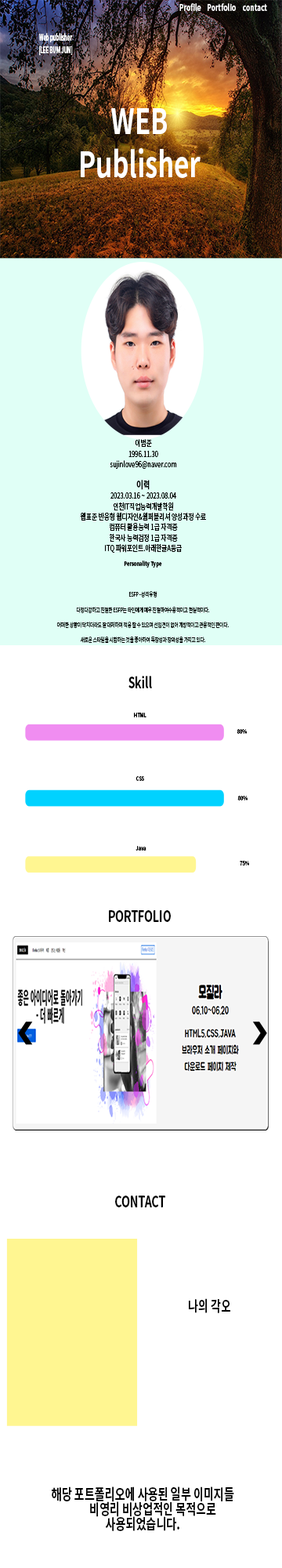
<style>
.page{position:relative;width:282px;height:1568px;background:#ffffff}
.page>*{position:absolute;margin:0}
.t1{font:9.1px "NotoSansKR-Bold";color:#ffffff;scale:0.73 1}
.t2{font:9.1px/12.1px "NotoSansKR-Bold";color:#ffffff;scale:0.51 1}
.t3{font:9.1px/12.1px "NotoSansKR-Regular";color:#ffffff;scale:0.51 1}
.t4{font:35.4px/43px "NotoSansKR-Bold";color:#ffffff;scale:0.73 1}
.t5{font:8.3px/10.5px "NotoSansKR-Regular";color:#000000;scale:0.73 1}
.t6{font:10.1px/10.5px "NotoSansKR-Bold";color:#000000;scale:0.73 1}
.t7{font:6.3px/15.2px "NotoSansKR-Regular";letter-spacing:-0.06em;color:#000000;scale:0.73 1}
.t8{font:8.3px/15.2px "NotoSansKR-Regular";color:#000000;scale:0.73 1}
.t9{font:6.3px/15.2px "NotoSansKR-Bold";color:#000000;scale:0.73 1}
.t10{font:15.2px "NotoSansKR-Bold";color:#000000;scale:0.73 1}
.t11{font:6.1px "NotoSansKR-Bold";color:#000000;scale:0.73 1}
.t12{font:15.2px/15.1px "NotoSansKR-Bold";color:#000000;scale:0.73 1}
</style>
<div class="page">
<p class="t1" style="left:180px;top:3px;width:21px;height:8px">Profile</p>
<p class="t1" style="left:208px;top:3px;width:28px;height:8px">Portfolio</p>
<p class="t1" style="left:243px;top:4px;width:24px;height:7px">contact</p>
<p class="t2" style="left:39px;top:33px;width:34px;height:23px;text-align:center">Web publisher<br>[LEE BUM JUN<span class="t3">]</span></p>
<p class="t4" style="left:81px;top:108px;width:120px;height:70px;text-align:center">WEB<br>Publisher</p>
<p class="t5" style="left:80px;top:439px;width:126px;height:114px;text-align:center">이범준<br>1996.11.30<br>sujinlove96@naver.com<br><br><span class="t6">이력<br></span>2023.03.16 ~ 2023.08.04<br>인천IT직업능력개발학원<br>웹표준 반응형 웹디자인&amp;웹퍼블리셔 양성과정 수료<br>컴퓨터 활용능력 1급 자격증<br>한국사 능력검정 1급 자격증<br>ITQ 파워포인트.아래한글A등급</p>
<p class="t7" style="left:56px;top:561px;width:173px;height:82px;text-align:center"><span class="t8"><br></span><span class="t9">Personality Type<br><br></span>ESFP - 성격유형<br>다정다감하고 친절한 ESFP는 타인에게 매우 친절하며수용적이고 현실적이다.<br>어떠한 상황이 닥치더라도 잘 대처하며 적응 할 수 있으며 선입견이 없어 개방적이고 관용적인 편이다.<br>새로운 스타일을 시험하는 것을 좋아하여 독창성과 창의성을 가지고 있다.</p>
<p class="t10" style="left:129px;top:676px;width:23px;height:12px">Skill</p>
<p class="t11" style="left:134px;top:713px;width:13px;height:4px">HTML</p>
<p class="t11" style="left:237px;top:729px;width:10px;height:5px">80%</p>
<p class="t11" style="left:136px;top:776px;width:8px;height:5px">CSS</p>
<p class="t11" style="left:238px;top:796px;width:10px;height:4px">80%</p>
<p class="t11" style="left:136px;top:846px;width:11px;height:5px">Java</p>
<p class="t11" style="left:240px;top:861px;width:9px;height:5px">75%</p>
<p class="t10" style="left:109px;top:910px;width:62px;height:12px">PORTFOLIO</p>
<p class="t10" style="left:115px;top:1196px;width:50px;height:11px">CONTACT</p>
<p class="t10" style="left:189px;top:1298px;width:41px;height:15px">나의 각오</p>
<p class="t12" style="left:52px;top:1486px;width:182px;height:45px;text-align:center">해당 포트폴리오에 사용된 일부 이미지들<br>        비영리 비상업적인 목적으로 사용되었습니다.</p>
</div>
